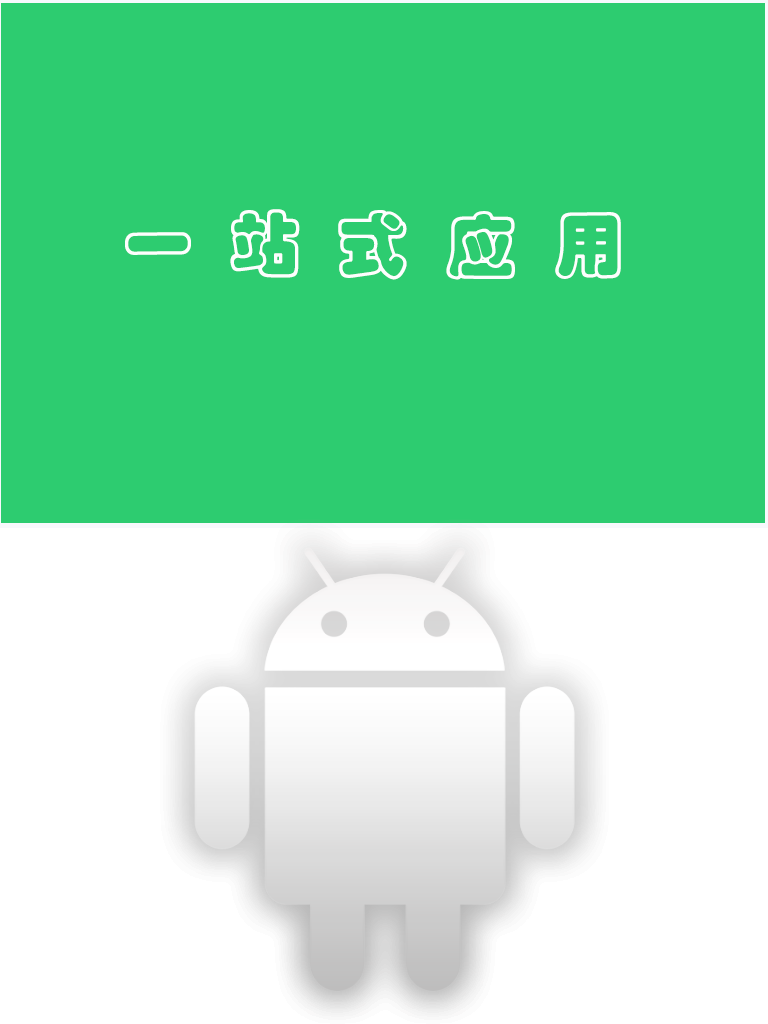
<style>
.page{position:relative;width:768px;height:1024px;background:#2dcc70}
.page>*{position:absolute;margin:0}
.t1{font:72px "STCaiyun";color:#fdfefe}
</style>
<div class="page">
<p class="t1" style="left:125px;top:209px;width:496px;height:71px">一  站  式  应  用</p>
</div>
